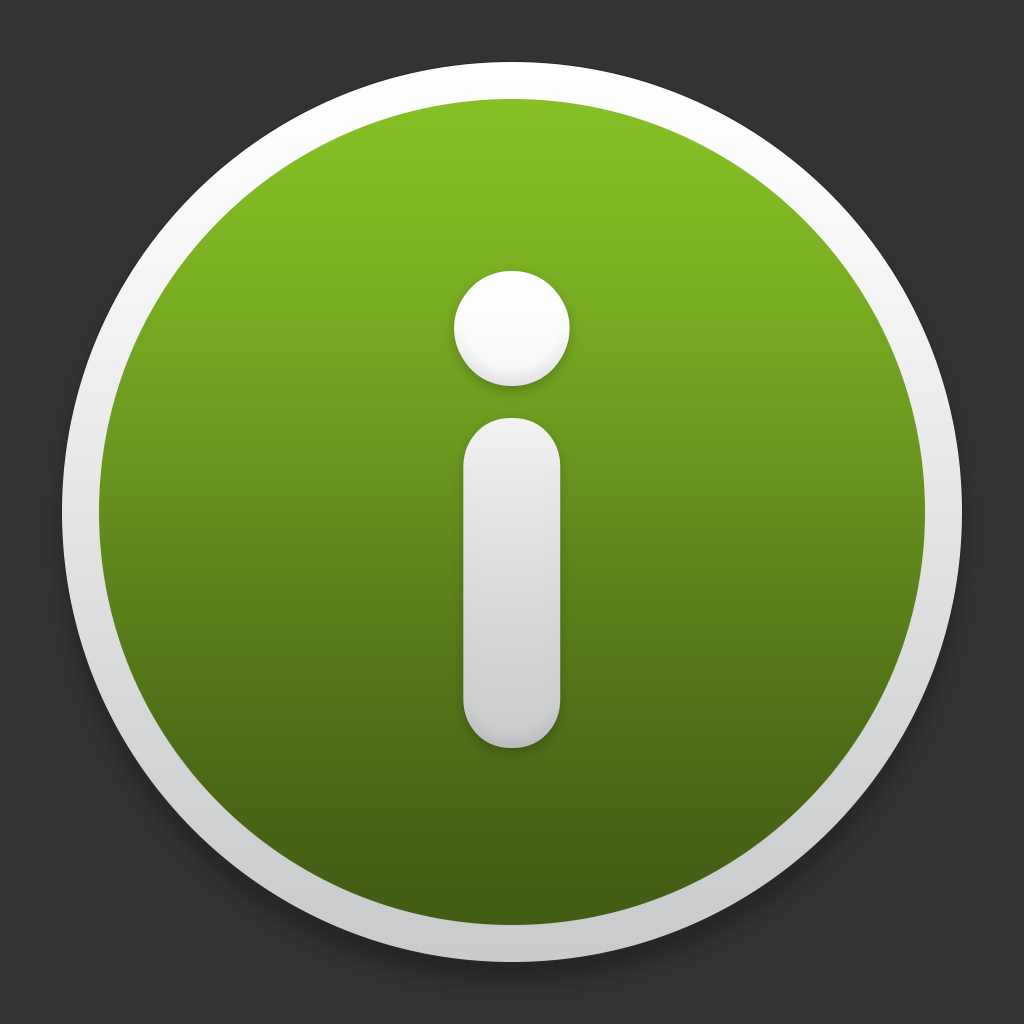
<style>
.page{position:relative;width:1024px;height:1024px;background:#333333}
.page>*{position:absolute;margin:0}
.t1{font:620px "VAGRounded-Black"}
</style>
<div class="page">
<p class="t1" style="left:454px;top:271px;width:116px;height:477px">i</p>
</div>
